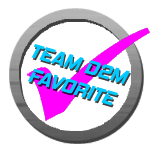
<style>
.page{position:relative;width:150px;height:150px;background:#ffffff}
.page>*{position:absolute;margin:0}
.t1{font:20px "HemiHeadRg-BoldItalic";color:#00c9ff}
</style>
<div class="page">
<p class="t1" style="left:28px;top:44px;width:102px;height:62px;text-align:center;rotate:16deg">TEAM D2M<br>FAVORITE</p>
</div>
